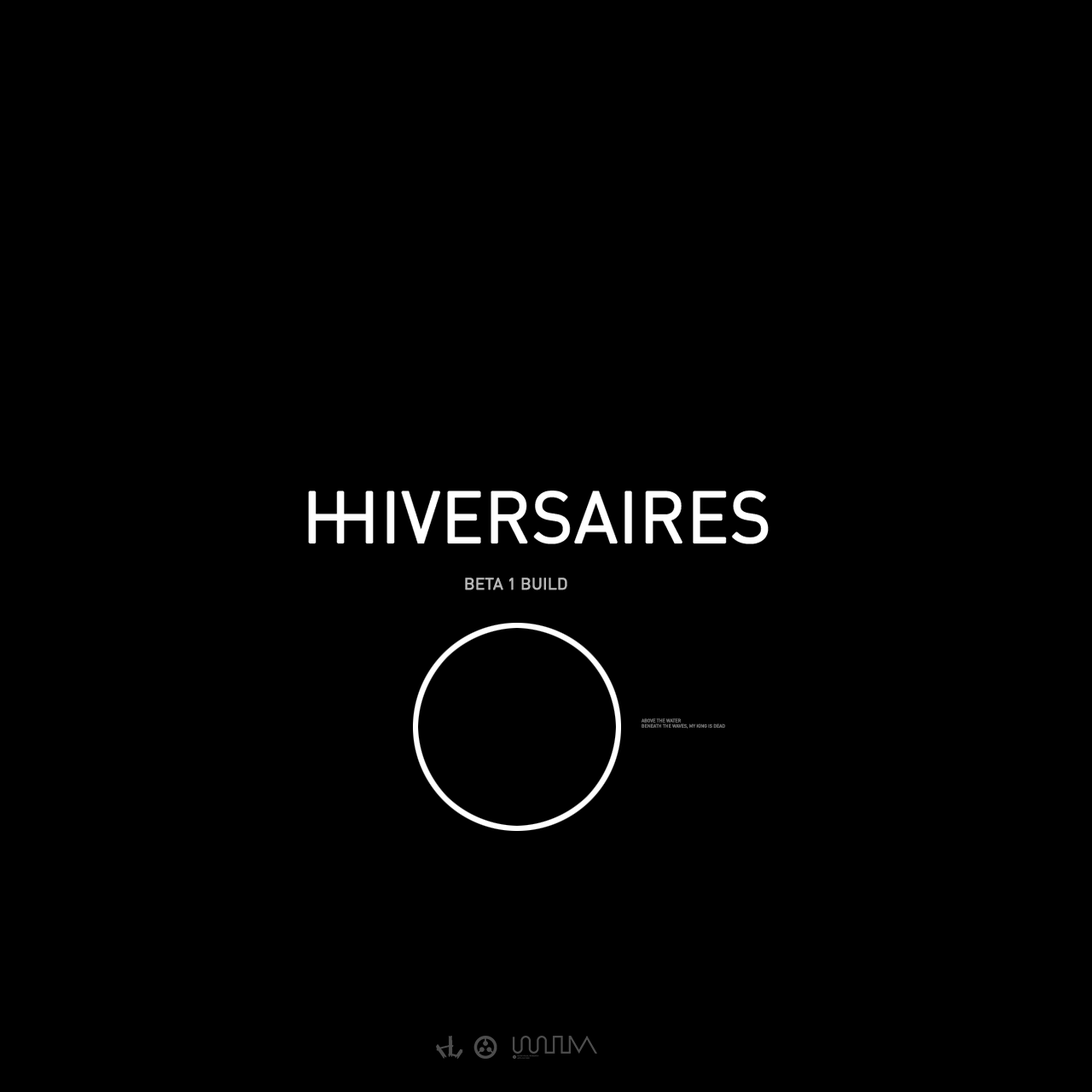
<style>
.page{position:relative;width:1092px;height:1092px;background:#000000}
.page>*{position:absolute;margin:0}
.t1{font:15.8px "DIN-Regular";letter-spacing:-0.01em;color:#b8b8b8;font-weight:bold}
.t2{font:4.5px "DIN-Regular";letter-spacing:-0.01em;color:#747474;font-weight:bold}
</style>
<div class="page">
<p class="t1" style="left:465px;top:578px;width:102px;height:12px">BETA 1 BUILD</p>
<p class="t2" style="left:642px;top:718px;width:83px;height:11px">ABOVE THE WATER<br>BENEATH THE WAVES, MY KING IS DEAD</p>
</div>
